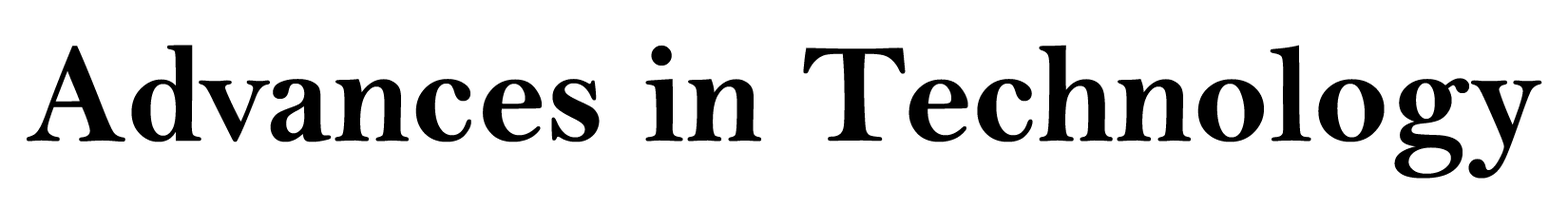
<style>
.page{position:relative;width:1568px;height:209px;background:#ffffff}
.page>*{position:absolute;margin:0}
.t1{font:142.5px "BellMTBold";color:#000000}
</style>
<div class="page">
<p class="t1" style="left:27px;top:45px;width:1515px;height:134px">Advances in Technology</p>
</div>
